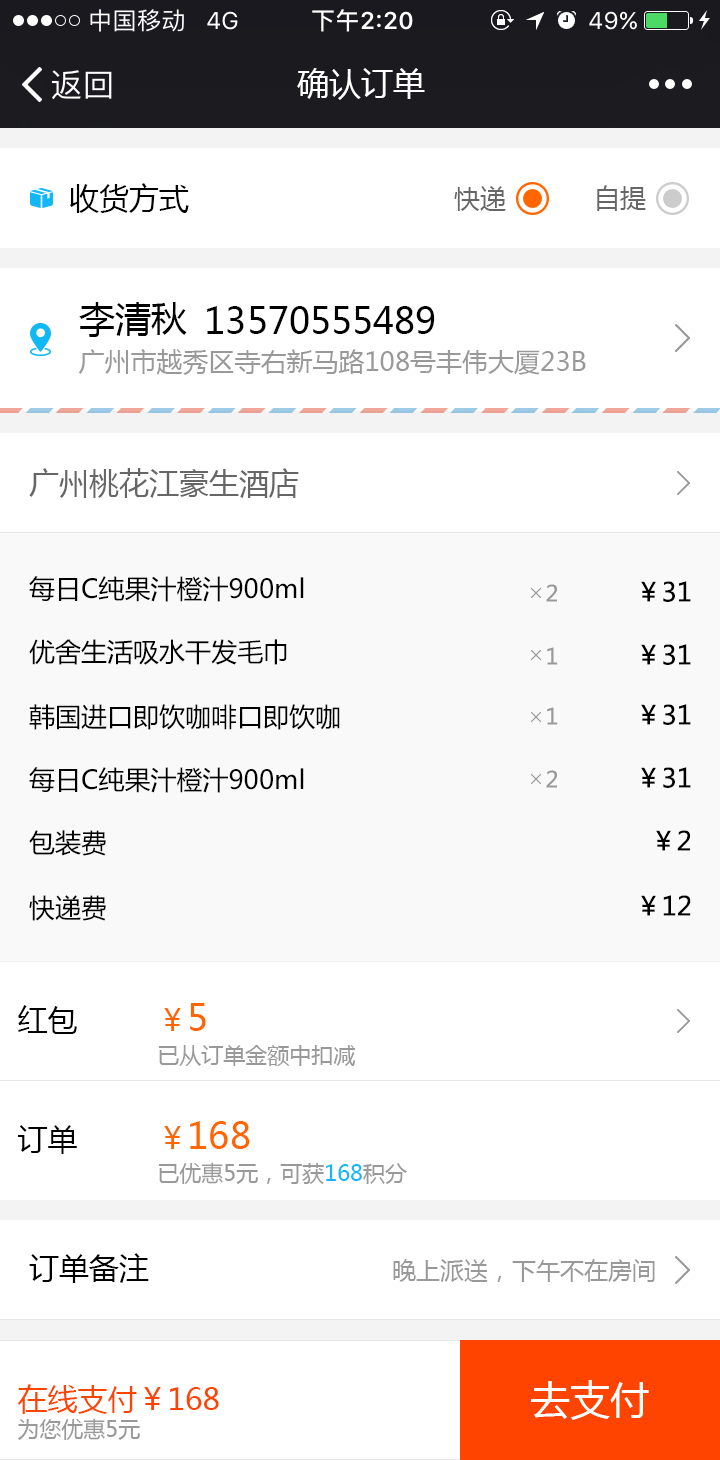
<style>
.page{position:relative;width:720px;height:1460px;background:#ffffff}
.page>*{position:absolute;margin:0}
.t1{font:32px "MicrosoftYaHei";color:#ffffff}
.t2{font:30px "MicrosoftYaHei";color:#000000}
.t3{font:26px "MicrosoftYaHei";color:#666666}
.t4{font:36px "MicrosoftYaHei";color:#000000}
.t5{font:26px "MicrosoftYaHei";color:#999999}
.t6{font:30px "MicrosoftYaHei";color:#666666}
.t7{font:26px "MicrosoftYaHei";color:#000000}
.t8{font:22px "MicrosoftYaHei";color:#999999}
.t9{font:22px/44px "MicrosoftYaHei";color:#999999}
.t10{font:30px/44px "MicrosoftYaHei";color:#ff6600}
.t11{font:36px/44px "MicrosoftYaHei";color:#ff6600}
.t12{font:22px/44px "MicrosoftYaHei";color:#12b7f5}
.t13{font:24px "MicrosoftYaHei";color:#999999}
.t14{font:30px/34px "MicrosoftYaHei";color:#ff4400}
.t15{font:22px/34px "MicrosoftYaHei";color:#999999}
.t16{font:40px "MicrosoftYaHei";color:#ffffff}
</style>
<div class="page">
<p class="t1" style="left:297px;top:68px;width:128px;height:32px">确认订单</p>
<p class="t2" style="left:70px;top:183px;width:119px;height:30px">收货方式</p>
<p class="t3" style="left:597px;top:185px;width:49px;height:26px">自提</p>
<p class="t3" style="left:454px;top:186px;width:52px;height:25px">快递</p>
<p class="t4" style="left:79px;top:302px;width:108px;height:35px">李清秋</p>
<p class="t4" style="left:207px;top:306px;width:228px;height:28px">13570555489</p>
<p class="t5" style="left:78px;top:349px;width:508px;height:26px">广州市越秀区寺右新马路108号丰伟大厦23B</p>
<p class="t6" style="left:29px;top:468px;width:270px;height:30px">广州桃花江豪生酒店</p>
<p class="t7" style="left:29px;top:576px;width:275px;height:26px">每日C纯果汁橙汁900ml</p>
<p class="t7" style="left:641px;top:581px;width:50px;height:21px">￥31</p>
<p class="t8" style="left:546px;top:584px;width:11px;height:18px">2</p>
<p class="t7" style="left:29px;top:639px;width:258px;height:26px">优舍生活吸水干发毛巾</p>
<p class="t8" style="left:547px;top:647px;width:11px;height:18px">1</p>
<p class="t7" style="left:641px;top:644px;width:50px;height:21px">￥31</p>
<p class="t7" style="left:29px;top:704px;width:311px;height:26px">韩国进口即饮咖啡口即饮咖</p>
<p class="t8" style="left:547px;top:707px;width:11px;height:18px">1</p>
<p class="t7" style="left:641px;top:704px;width:50px;height:21px">￥31</p>
<p class="t7" style="left:29px;top:767px;width:275px;height:26px">每日C纯果汁橙汁900ml</p>
<p class="t8" style="left:546px;top:770px;width:11px;height:18px">2</p>
<p class="t7" style="left:641px;top:767px;width:50px;height:21px">￥31</p>
<p class="t7" style="left:29px;top:830px;width:77px;height:26px">包装费</p>
<p class="t7" style="left:656px;top:830px;width:34px;height:21px">￥2</p>
<p class="t7" style="left:29px;top:895px;width:77px;height:26px">快递费</p>
<p class="t7" style="left:641px;top:895px;width:50px;height:21px">￥12</p>
<p class="t2" style="left:18px;top:1005px;width:59px;height:29px">红包</p>
<p class="t9" style="left:158px;top:1003px;width:198px;height:63px"><span class="t10">￥</span><span class="t11">5<br></span>已从订单金额中扣减</p>
<p class="t9" style="left:158px;top:1121px;width:249px;height:63px"><span class="t10">￥</span><span class="t11">168<br></span>已优惠5元，可获<span class="t12">168</span>积分</p>
<p class="t2" style="left:18px;top:1125px;width:59px;height:29px">订单</p>
<p class="t2" style="left:29px;top:1253px;width:120px;height:30px">订单备注</p>
<p class="t13" style="left:393px;top:1259px;width:262px;height:23px">晚上派送，下午不在房间</p>
<p class="t14" style="left:17px;top:1384px;width:202px;height:56px">在线支付￥168<br><span class="t15">为您优惠5元</span></p>
<p class="t16" style="left:531px;top:1380px;width:118px;height:40px">去支付</p>
</div>
